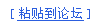
<style>
.page{position:relative;width:100px;height:25px;background:#ffffff}
.page>*{position:absolute;margin:0}
.t1{font:12px "SimSun";letter-spacing:0.08em;color:#2c5ede}
</style>
<div class="page">
<p class="t1" style="left:19px;top:7px;width:63px;height:12px">粘贴到论坛</p>
</div>
